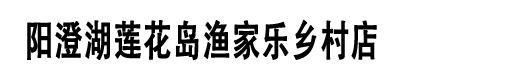
<style>
.page{position:relative;width:519px;height:82px;background:#ffffff}
.page>*{position:absolute;margin:0}
.t1{font:42px "AdobeHeitiStd-Regular";letter-spacing:0.03em;color:#000000;font-weight:bold;scale:0.67 1}
</style>
<div class="page">
<p class="t1" style="left:27px;top:19px;width:350px;height:42px">阳澄湖莲花岛渔家乐乡村店</p>
</div>
